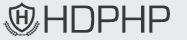
<style>
.page{position:relative;width:187px;height:40px;background:#e9eaeb}
.page>*{position:absolute;margin:0}
.t1{font:40.7px "EurostileRegular";color:#393939}
</style>
<div class="page">
<p class="t1" style="left:44px;top:5px;width:126px;height:28px">HDPHP</p>
</div>
